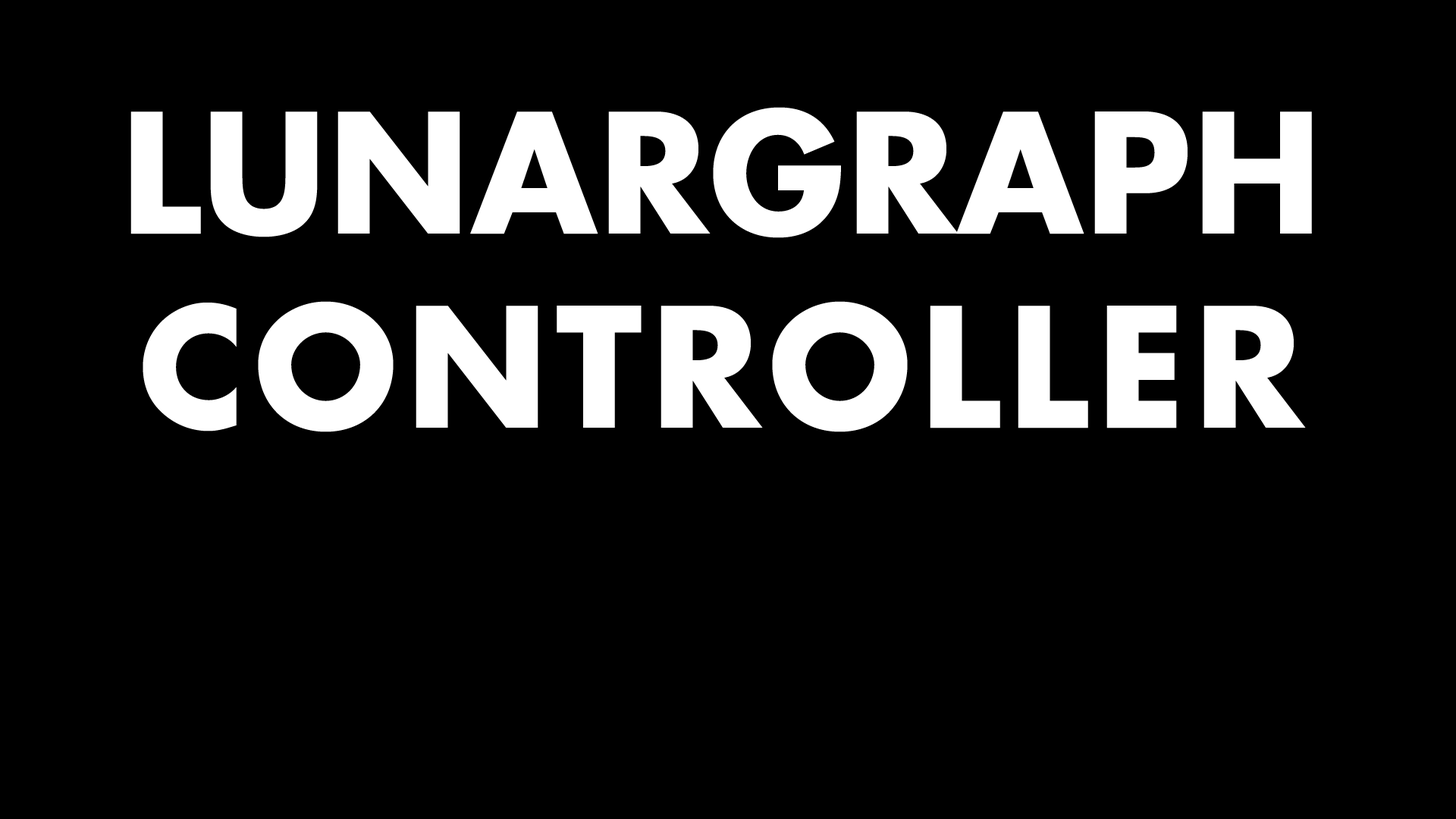
<style>
.page{position:relative;width:1456px;height:819px;background:#000000}
.page>*{position:absolute;margin:0}
.t1{font:161.8px "FuturaLTPro-Bold";letter-spacing:0.005em;color:#ffffff}
.t2{font:161.8px "FuturaLTPro-Bold";letter-spacing:0.05em;color:#ffffff}
</style>
<div class="page">
<p class="t1" style="left:130px;top:107px;width:1182px;height:325px;text-align:center">LUNARGRAPH<br><span class="t2">CONTROLLER</span></p>
</div>
